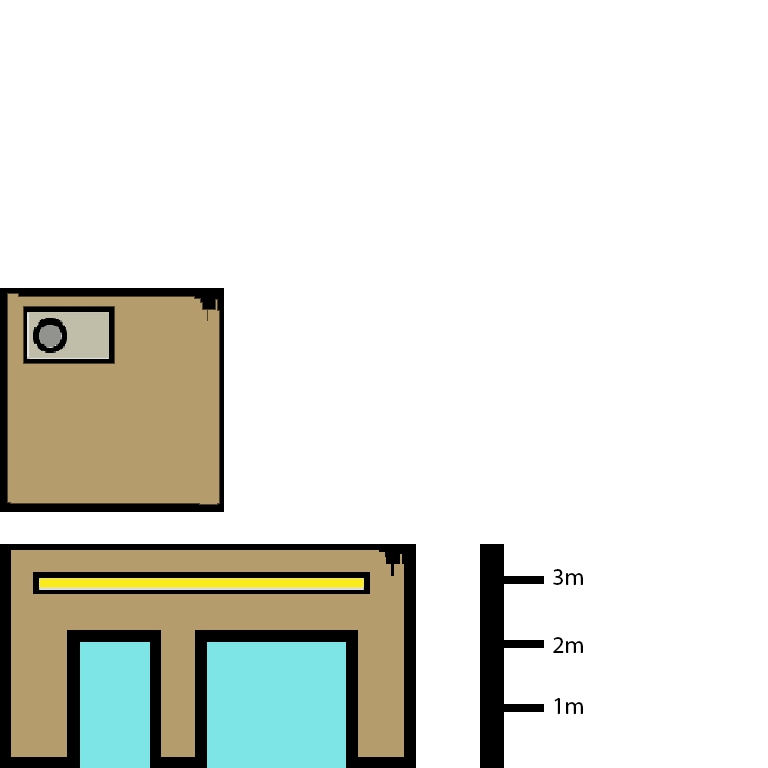
<style>
.page{position:relative;width:768px;height:768px;background:#ffffff}
.page>*{position:absolute;margin:0}
.t1{font:24px "MyriadPro-Regular";color:#000000}
</style>
<div class="page">
<p class="t1" style="left:553px;top:569px;width:30px;height:16px">3m</p>
<p class="t1" style="left:553px;top:637px;width:30px;height:16px">2m</p>
<p class="t1" style="left:554px;top:698px;width:29px;height:16px">1m</p>
</div>
